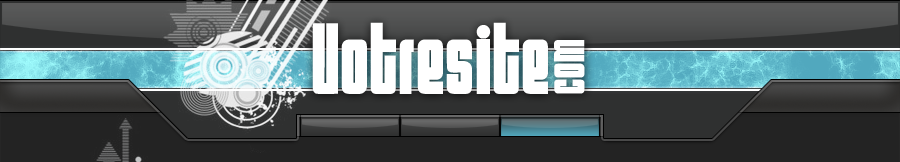
<style>
.page{position:relative;width:900px;height:162px}
.page>*{position:absolute;margin:0}
.t1{font:90px "Sumo";letter-spacing:0.025em;color:#ffffff}
.t2{font:50px "Sumo";letter-spacing:0.025em;color:#ffffff}
</style>
<div class="page">
<p class="t1" style="left:312px;top:22px;width:236px;height:72px">Votresite</p>
<p class="t2" style="left:554px;top:40px;width:31px;height:54px;rotate:-90deg">com</p>
</div>
